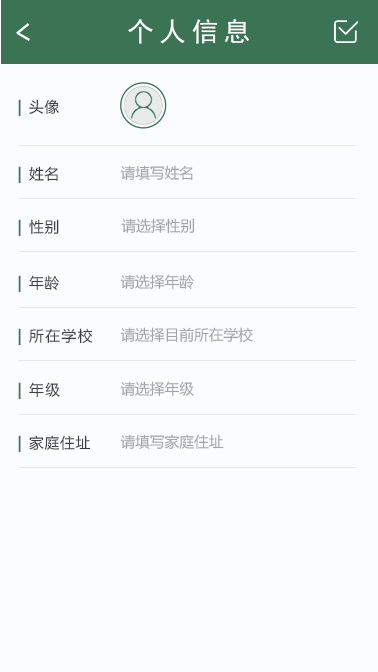
<style>
.page{position:relative;width:378px;height:672px;background:#fbfcfd}
.page>*{position:absolute;margin:0}
.t1{font:26.7px "SimHei";letter-spacing:0.2em;color:#ffffff}
.t2{font:14.7px "MicrosoftYaHei";letter-spacing:0.05em;color:#3f3f3f}
.t3{font:14.7px "MicrosoftYaHei";letter-spacing:0.1em;color:#3a7455;font-weight:bold}
.t4{font:14.7px "MicrosoftYaHei";color:#a4a4a4}
.t5{font:14.7px "MicrosoftYaHei";letter-spacing:0.1em;color:#3f3f3f}
</style>
<div class="page">
<p class="t1" style="left:128px;top:19px;width:121px;height:25px">个人信息</p>
<p class="t2" style="left:18px;top:99px;width:41px;height:18px"><span class="t3">| </span>头像</p>
<p class="t2" style="left:18px;top:166px;width:40px;height:18px"><span class="t3">| </span>姓名</p>
<p class="t4" style="left:120px;top:165px;width:73px;height:15px">请填写姓名</p>
<p class="t2" style="left:18px;top:219px;width:41px;height:18px"><span class="t3">| </span>性别</p>
<p class="t4" style="left:121px;top:218px;width:74px;height:16px">请选择性别</p>
<p class="t2" style="left:18px;top:275px;width:41px;height:18px"><span class="t3">| </span>年龄</p>
<p class="t4" style="left:120px;top:274px;width:74px;height:15px">请选择年龄</p>
<p class="t5" style="left:18px;top:328px;width:75px;height:18px"><span class="t3">|</span> 所在学校</p>
<p class="t4" style="left:120px;top:327px;width:133px;height:15px">请选择目前所在学校</p>
<p class="t5" style="left:18px;top:382px;width:42px;height:18px"><span class="t3">|</span> 年级</p>
<p class="t4" style="left:120px;top:381px;width:74px;height:15px">请选择年级</p>
<p class="t2" style="left:18px;top:435px;width:73px;height:18px"><span class="t3">| </span>家庭住址</p>
<p class="t4" style="left:120px;top:434px;width:104px;height:15px">请填写家庭住址</p>
</div>
